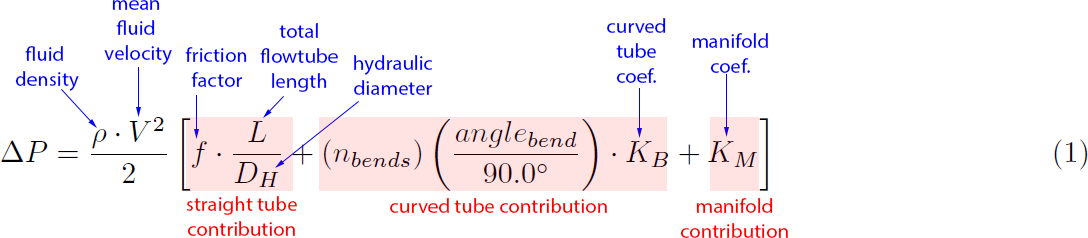
<style>
.page{position:relative;width:1088px;height:238px;background:#ffffff}
.page>*{position:absolute;margin:0}
.t1{font:20.8px "MyriadPro-Regular";color:#0000ff}
.t2{font:20.8px "MyriadPro-Regular";color:#ff0000}
</style>
<div class="page">
<p class="t1" style="left:104px;top:0px;width:68px;height:65px;text-align:center">mean <br>fluid <br>velocity</p>
<p class="t1" style="left:260px;top:23px;width:78px;height:69px;text-align:center">total<br>flowtube<br>length</p>
<p class="t1" style="left:607px;top:18px;width:59px;height:65px;text-align:center">curved<br>tube<br>coef.</p>
<p class="t1" style="left:692px;top:33px;width:76px;height:40px;text-align:center">manifold<br>coef.</p>
<p class="t1" style="left:15px;top:46px;width:64px;height:45px;text-align:center">fluid <br>density</p>
<p class="t1" style="left:185px;top:47px;width:62px;height:40px;text-align:center">friction<br>factor</p>
<p class="t1" style="left:354px;top:55px;width:79px;height:40px;text-align:center">hydraulic<br>diameter</p>
<p class="t2" style="left:186px;top:196px;width:111px;height:40px;text-align:center">straight tube<br>contribution</p>
<p class="t2" style="left:390px;top:198px;width:217px;height:15px">curved tube contribution</p>
<p class="t2" style="left:680px;top:198px;width:108px;height:40px;text-align:center">manifold<br>contribution</p>
</div>
